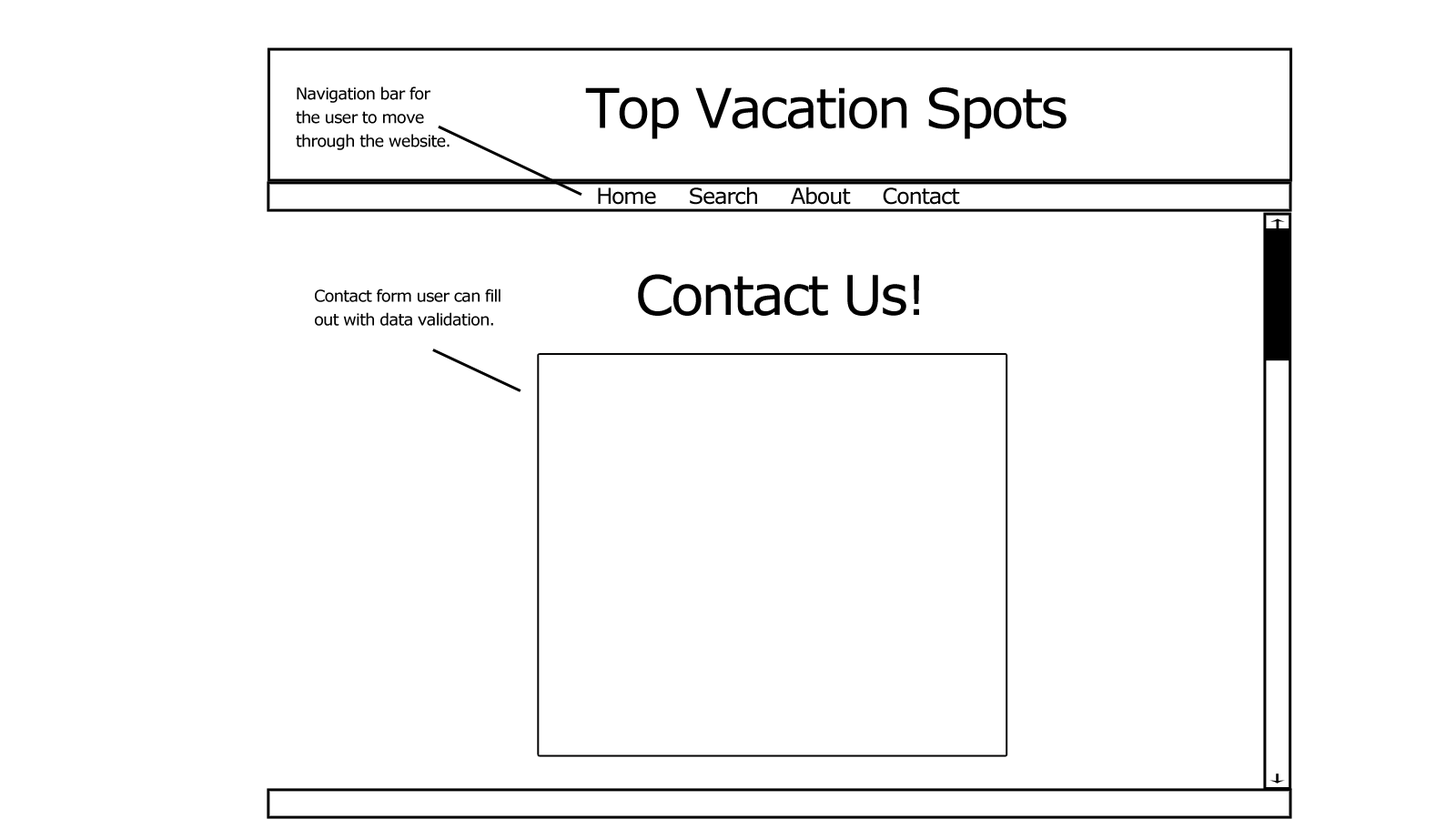
<style>
.page{position:relative;width:1456px;height:819px;background:#ffffff}
.page>*{position:absolute;margin:0}
.t1{font:16.4px/23.7px "Verdana";letter-spacing:-0.05em;color:#000000}
.t2{font:54.6px "Verdana";letter-spacing:-0.05em;color:#000000}
.t3{font:21.8px "Verdana";letter-spacing:-0.05em;color:#000000}
</style>
<div class="page">
<p class="t1" style="left:296px;top:86px;width:154px;height:64px">Navigation bar for <br>the user to move <br>through the website.</p>
<p class="t2" style="left:585px;top:87px;width:482px;height:52px">Top Vacation Spots</p>
<p class="t3" style="left:598px;top:187px;width:362px;height:18px">Home     Search     About     Contact</p>
<p class="t2" style="left:638px;top:274px;width:281px;height:42px">Contact Us!</p>
<p class="t1" style="left:315px;top:288px;width:185px;height:38px">Contact form user can fill<br>out with data validation.</p>
</div>
